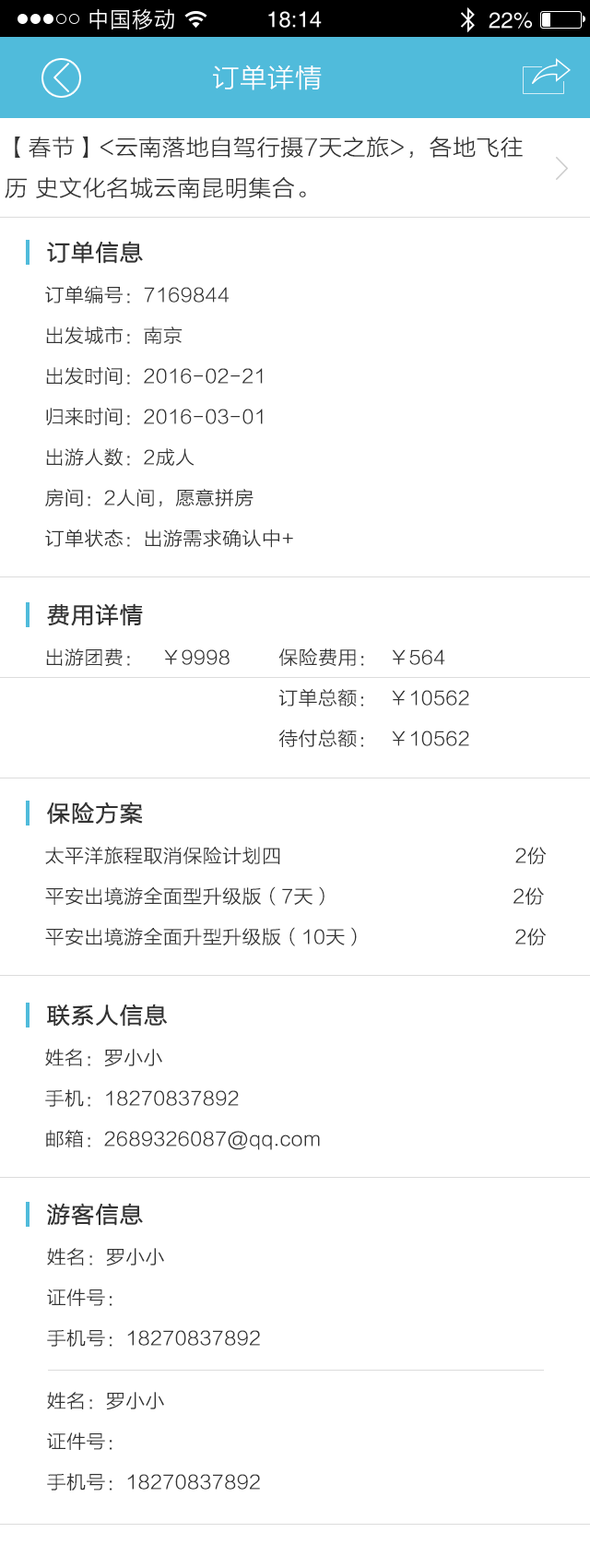
<style>
.page{position:relative;width:590px;height:1568px;background:#ffffff}
.page>*{position:absolute;margin:0}
.t1{font:25.8px "STHeitiSC-Light";letter-spacing:-0.04em;color:#ffffff;scale:1.03 1}
.t2{font:22.1px/40.6px "STHeitiSC-Light";letter-spacing:-0.04em;color:#333333;scale:1.03 1}
.t3{font:22.1px "STHeitiSC-Light";letter-spacing:-0.04em;color:#333333;font-weight:bold;scale:1.03 1}
.t4{font:18.4px/40.6px "STHeitiSC-Light";letter-spacing:-0.04em;color:#333333;scale:1.03 1}
</style>
<div class="page">
<p class="t1" style="left:213px;top:65px;width:109px;height:25px">订单详情</p>
<p class="t2" style="left:5px;top:137px;width:518px;height:61px">【春节】&lt;云南落地自驾行摄7天之旅&gt;，各地飞往<br>历 史文化名城云南昆明集合。</p>
<p class="t3" style="left:47px;top:241px;width:96px;height:23px">订单信息</p>
<p class="t4" style="left:45px;top:286px;width:248px;height:262px">订单编号：7169844<br>出发城市：南京<br>出发时间：2016-02-21<br>归来时间：2016-03-01<br>出游人数：2成人<br>房间：2人间，愿意拼房<br>订单状态：出游需求确认中+</p>
<p class="t3" style="left:47px;top:603px;width:96px;height:23px">费用详情</p>
<p class="t4" style="left:46px;top:648px;width:423px;height:99px">出游团费：   ￥9998        保险费用：  ￥564<br>                                       订单总额：  ￥10562<br>                                       待付总额：  ￥10562</p>
<p class="t3" style="left:47px;top:802px;width:96px;height:23px">保险方案</p>
<p class="t4" style="left:45px;top:847px;width:502px;height:99px">太平洋旅程取消保险计划四                                       2份<br>平安出境游全面型升级版（7天）                              2份<br>平安出境游全面升型升级版（10天）                         2份</p>
<p class="t3" style="left:47px;top:1004px;width:120px;height:23px">联系人信息</p>
<p class="t4" style="left:45px;top:1049px;width:275px;height:101px">姓名：罗小小<br>手机：18270837892<br>邮箱：2689326087@qq.com</p>
<p class="t3" style="left:47px;top:1203px;width:96px;height:23px">游客信息</p>
<p class="t4" style="left:47px;top:1248px;width:213px;height:99px">姓名：罗小小<br>证件号：<br>手机号：18270837892</p>
<p class="t4" style="left:47px;top:1392px;width:213px;height:99px">姓名：罗小小<br>证件号：<br>手机号：18270837892</p>
</div>
